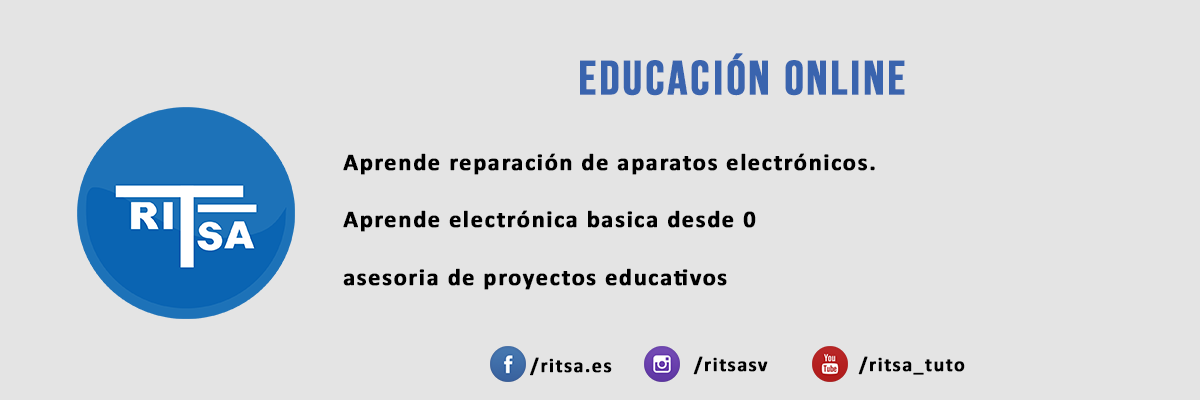
<style>
.page{position:relative;width:1200px;height:400px;background:#e4e4e4}
.page>*{position:absolute;margin:0}
.t1{font:48px "BebasNeueBold";letter-spacing:0.05em;color:#3a64ae;font-weight:bold}
.t2{font:24px "Calibri-Bold";letter-spacing:0.05em;color:#000000;font-weight:bold}
.t3{font:20px "Calibri-Bold";letter-spacing:0.05em;color:#000000;font-weight:bold}
</style>
<div class="page">
<p class="t1" style="left:580px;top:53px;width:325px;height:43px">Educación online</p>
<p class="t2" style="left:343px;top:153px;width:532px;height:137px">Aprende reparación de aparatos electrónicos.<br><br>Aprende electrónica basica desde 0<br><br>asesoria de proyectos educativos</p>
<p class="t3" style="left:530px;top:357px;width:82px;height:19px">/ritsa.es</p>
<p class="t3" style="left:693px;top:356px;width:75px;height:19px">/ritsasv</p>
<p class="t3" style="left:858px;top:356px;width:107px;height:19px">/ritsa_tuto</p>
</div>
